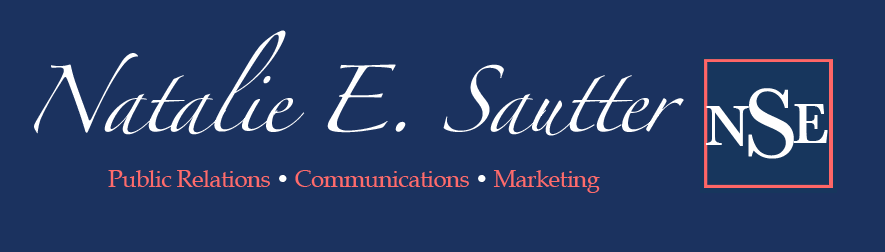
<style>
.page{position:relative;width:885px;height:252px;background:#1b325f}
.page>*{position:absolute;margin:0}
.t1{font:60px "Zapfino";letter-spacing:-0.05em;color:#ffffff}
.t2{font:100.5px "Baskerville";letter-spacing:0.025em;color:#fffefe;font-weight:bold}
.t3{font:57.4px "Baskerville";color:#ffffff;font-weight:bold}
.t4{font:24px "BookAntiqua";letter-spacing:-0.025em;color:#ff6b6b}
.t5{font:24px "BookAntiqua";letter-spacing:-0.025em;color:#ffffff}
</style>
<div class="page">
<p class="t1" style="left:34px;top:30px;width:650px;height:106px;text-align:center">Natalie E. Sautter</p>
<p class="t2" style="left:748px;top:88px;width:46px;height:71px">S</p>
<p class="t3" style="left:706px;top:106px;width:43px;height:40px">N</p>
<p class="t3" style="left:793px;top:104px;width:35px;height:39px">E</p>
<p class="t4" style="left:108px;top:170px;width:492px;height:23px">Public Relations <span class="t5">•</span> Communications <span class="t5">•</span> Marketing</p>
</div>
